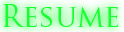
<style>
.page{position:relative;width:124px;height:32px}
.page>*{position:absolute;margin:0}
.t1{font:30px "TrajanPro-Regular";color:#17ff30}
</style>
<div class="page">
<p class="t1" style="left:3px;top:4px;width:116px;height:23px">Resume</p>
</div>
